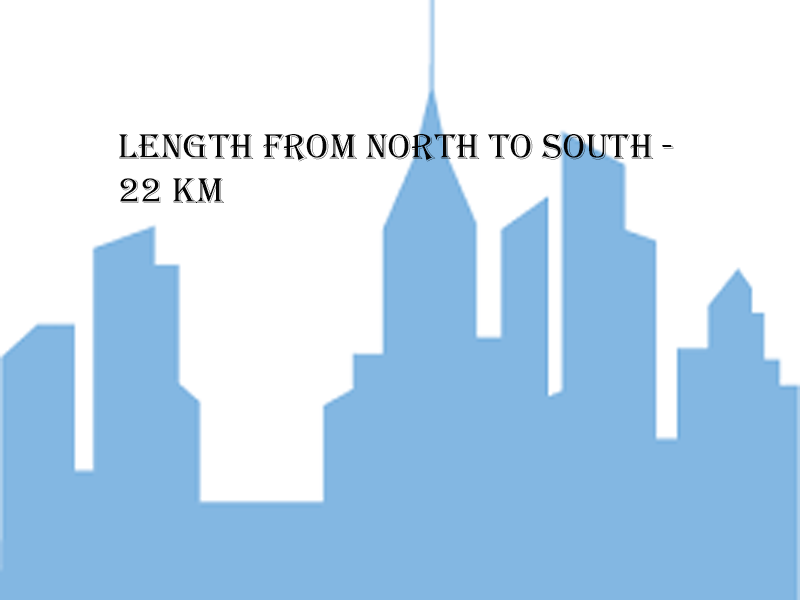
<style>
.page{position:relative;width:800px;height:600px;background:#ffffff}
.page>*{position:absolute;margin:0}
.t1{font:37px "Algerian";color:#050505}
</style>
<div class="page">
<p class="t1" style="left:119px;top:134px;width:555px;height:69px">length from north to south - <br>22 km</p>
</div>
